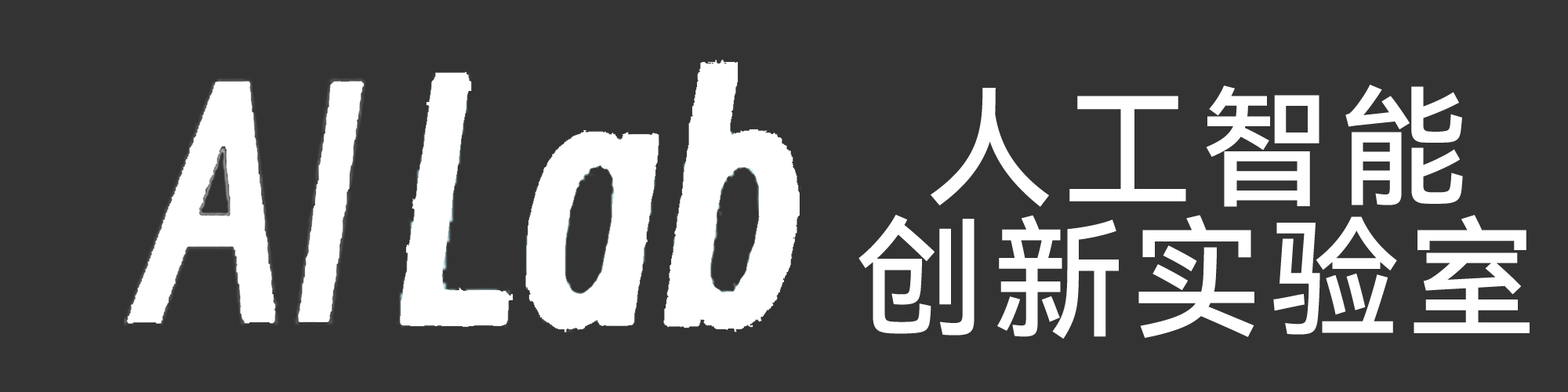
<style>
.page{position:relative;width:1568px;height:392px;background:#333333}
.page>*{position:absolute;margin:0}
.t1{font:130.7px/130.7px "HarmonyOS_Sans_SC_Medium";letter-spacing:0.057em;color:#ffffff}
</style>
<div class="page">
<p class="t1" style="left:858px;top:85px;width:672px;height:254px;text-align:center">人工智能<br>创新实验室</p>
</div>
